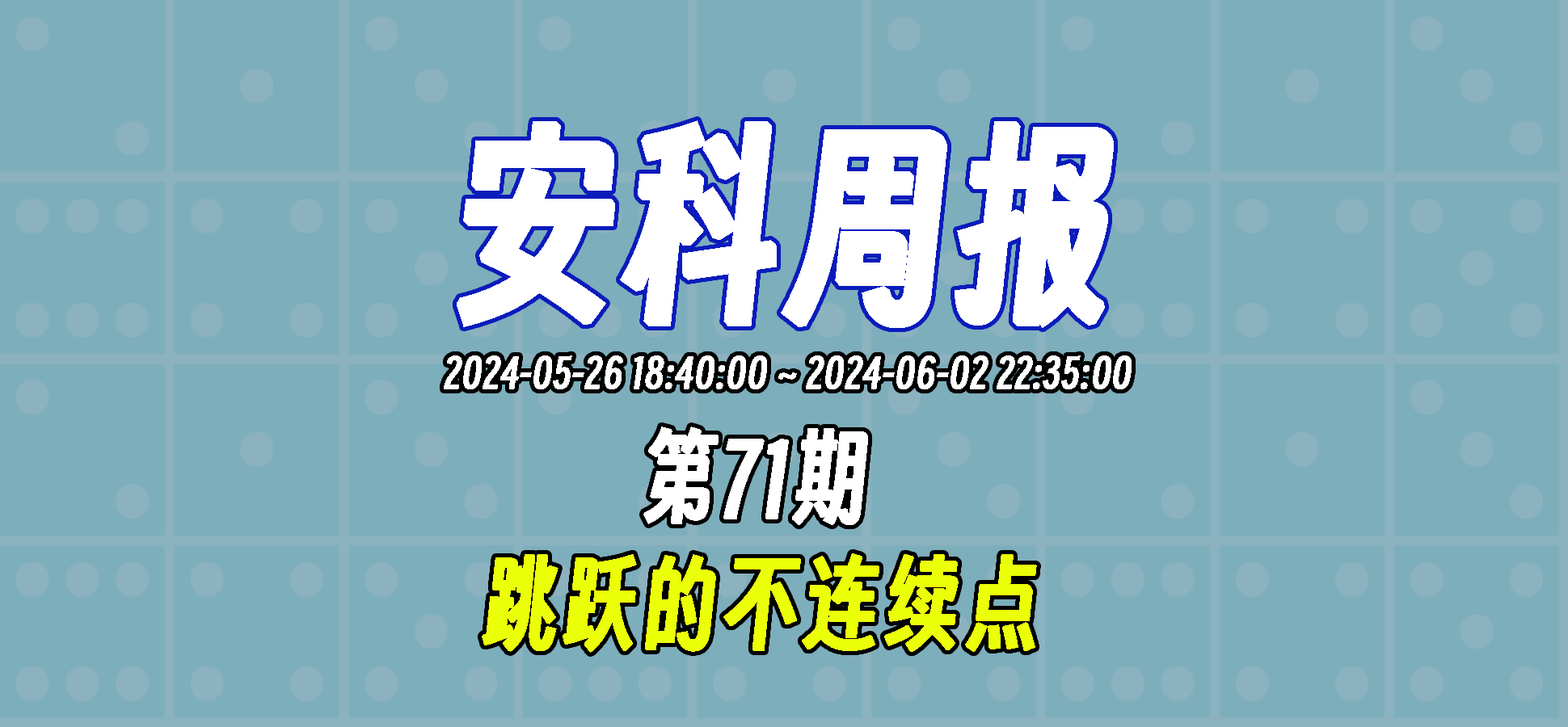
<style>
.page{position:relative;width:1568px;height:727px;background:#7daebc}
.page>*{position:absolute;margin:0}
.t1{font:202px "SmileySans-Oblique";color:#ffffff;font-weight:bold}
.t2{font:40.4px "SmileySans-Oblique";color:#ffffff;font-weight:bold}
.t3{font:97px "SmileySans-Oblique";color:#ffffff;font-weight:bold}
.t4{font:97px "SmileySans-Oblique";color:#ebff08;font-weight:bold}
</style>
<div class="page">
<p class="t1" style="left:457px;top:120px;width:657px;height:208px">安科周报</p>
<p class="t2" style="left:444px;top:356px;width:688px;height:34px">2024-05-26 18:40:00 ~ 2024-06-02 22:35:00</p>
<p class="t3" style="left:643px;top:427px;width:225px;height:98px">第71期</p>
<p class="t4" style="left:482px;top:554px;width:555px;height:99px">跳跃的不连续点</p>
</div>
